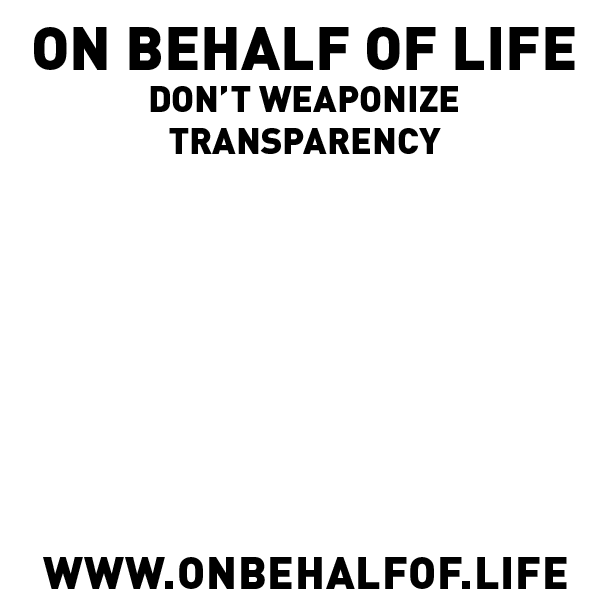
<style>
.page{position:relative;width:612px;height:612px;background:#ffffff}
.page>*{position:absolute;margin:0}
.t1{font:36px/42px "DIN-Black";color:#000000}
.t2{font:60px/59px "DIN-Black";color:#000000}
</style>
<div class="page">
<p class="t1" style="left:34px;top:27px;width:541px;height:127px;text-align:center"><span class="t2">ON BEHALF OF LIFE<br></span>DON’T WEAPONIZE<br>TRANSPARENCY</p>
</div>
